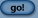
<style>
.page{position:relative;width:38px;height:18px}
.page>*{position:absolute;margin:0}
.t1{font:10px "Myriad-Bold";letter-spacing:-0.02em;color:#000000}
</style>
<div class="page">
<p class="t1" style="left:10px;top:4px;width:14px;height:9px">go!</p>
</div>
